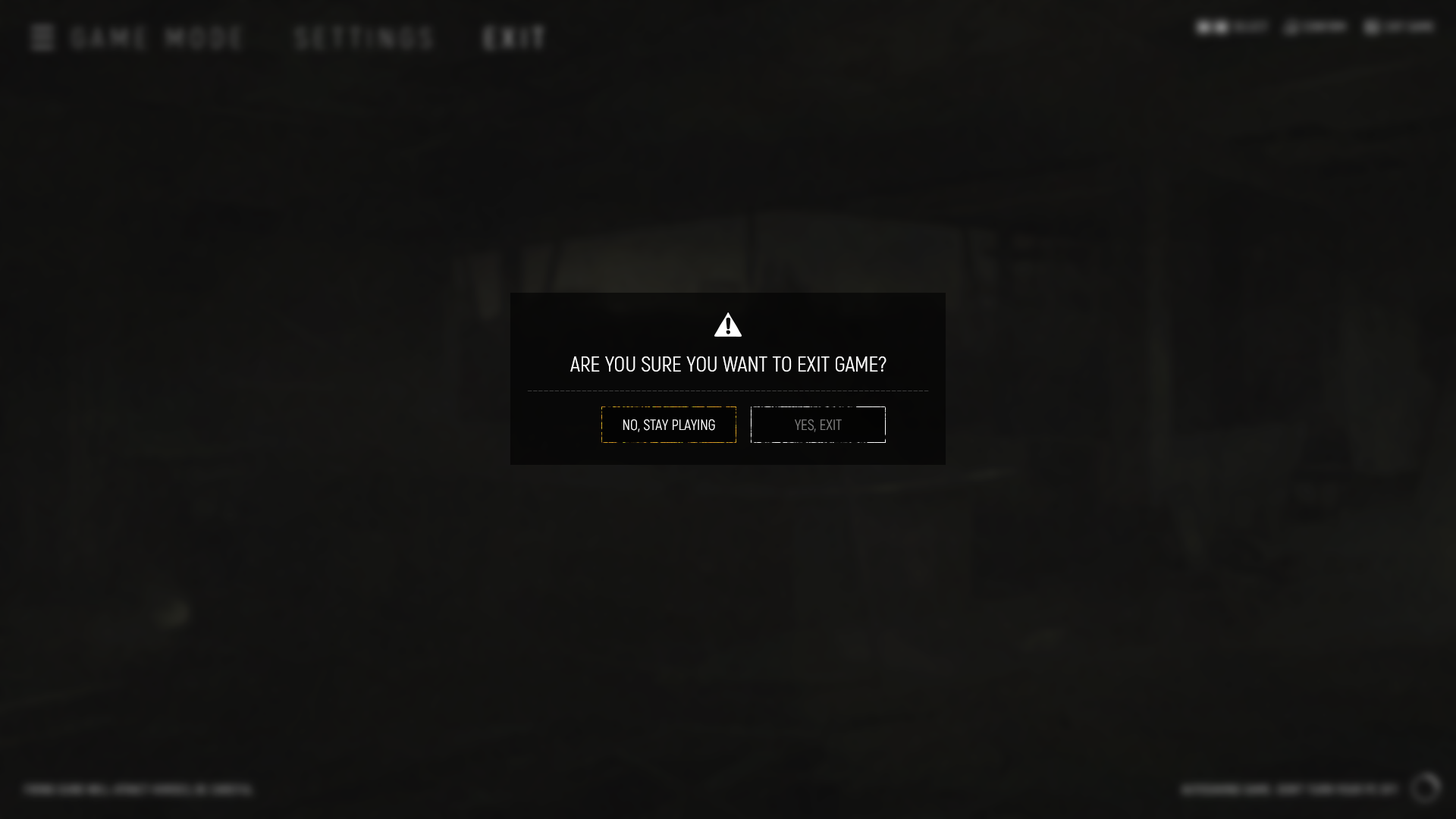
<style>
.page{position:relative;width:1456px;height:819px}
.page>*{position:absolute;margin:0}
.t1{font:21.4px "Akrobat-Regular";color:#ffffff}
.t2{font:16.6px "Akrobat-Regular";color:#3d3d3d}
.t3{font:14.6px "Akrobat-Regular";color:#ffffff}
.t4{font:14.6px "Akrobat-Regular";color:#808080}
</style>
<div class="page">
<p class="t1" style="left:570px;top:356px;width:316px;height:16px">ARE YOU SURE YOU WANT TO EXIT GAME?</p>
<p class="t2" style="left:527px;top:391px;width:402px;height:0px">--------------------------------------------------------------------------</p>
<p class="t3" style="left:623px;top:419px;width:92px;height:13px">NO, STAY PLAYING</p>
<p class="t4" style="left:795px;top:419px;width:47px;height:13px">YES, EXIT</p>
</div>
